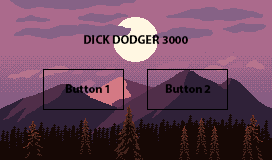
<style>
.page{position:relative;width:272px;height:160px;background:#ab6a8c}
.page>*{position:absolute;margin:0}
.t1{font:12px "MyriadPro-Bold";color:#000000}
</style>
<div class="page">
<p class="t1" style="left:84px;top:35px;width:104px;height:9px">DICK DODGER 3000</p>
<p class="t1" style="left:65px;top:84px;width:44px;height:9px">Button 1</p>
<p class="t1" style="left:165px;top:84px;width:46px;height:9px">Button 2</p>
</div>
